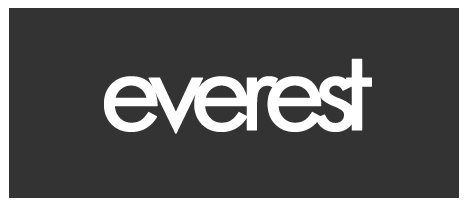
<style>
.page{position:relative;width:468px;height:207px;background:#333333}
.page>*{position:absolute;margin:0}
.t1{font:125px "Futura-Normal";letter-spacing:-0.137em;color:#ffffff;font-weight:bold;scale:1.06 1}
</style>
<div class="page">
<p class="t1" style="left:104px;top:58px;width:268px;height:76px">everest</p>
</div>
